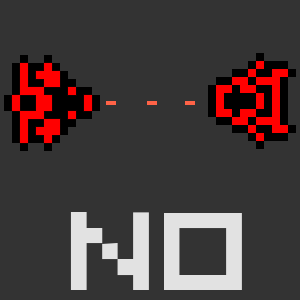
<style>
.page{position:relative;width:300px;height:300px;background:#333333}
.page>*{position:absolute;margin:0}
.t1{font:200px "VisitorTT2BRK";color:#e2e2e2}
</style>
<div class="page">
<p class="t1" style="left:70px;top:212px;width:172px;height:78px">NO</p>
</div>
